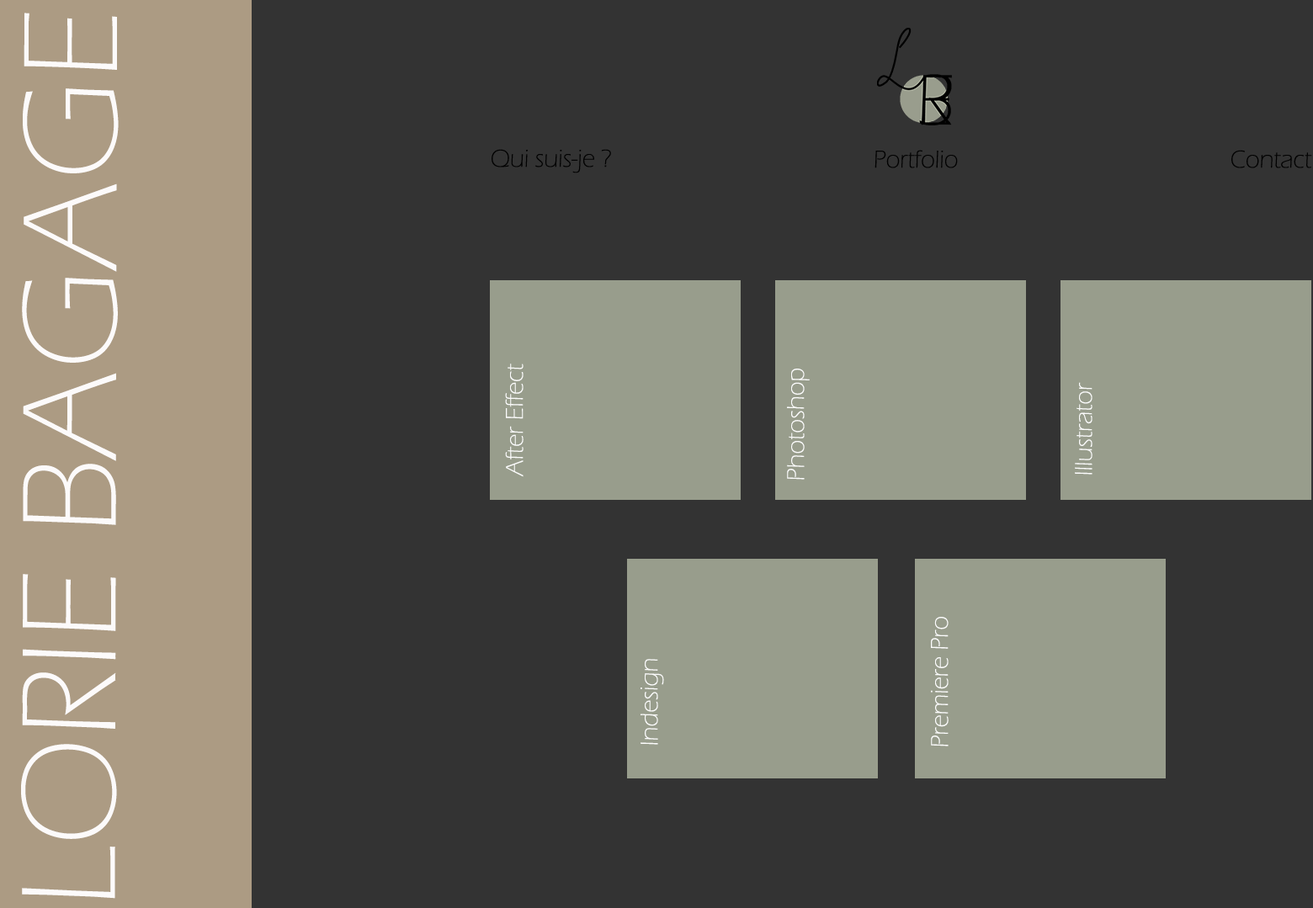
<style>
.page{position:relative;width:1313px;height:908px;background:#333333}
.page>*{position:absolute;margin:0}
.t1{font:138.9px "ErasITC-Light";letter-spacing:-0.005em;color:#fcfafa}
.t2{font:25.3px "ErasITC-Light";letter-spacing:-0.005em;color:#010101}
.t3{font:25.3px "ErasITC-Light";letter-spacing:-0.005em;color:#fcfcfc}
</style>
<div class="page">
<p class="t1" style="left:21px;top:13px;width:98px;height:886px;rotate:-90deg">LORIE BAGAGE</p>
<p class="t2" style="left:492px;top:149px;width:119px;height:24px">Qui suis-je ?</p>
<p class="t2" style="left:874px;top:150px;width:84px;height:18px">Portfolio</p>
<p class="t2" style="left:1231px;top:150px;width:81px;height:18px">Contact</p>
<p class="t3" style="left:505px;top:364px;width:19px;height:113px;rotate:-90deg">After Effect</p>
<p class="t3" style="left:787px;top:369px;width:23px;height:111px;rotate:-90deg">Photoshop</p>
<p class="t3" style="left:1075px;top:382px;width:17px;height:93px;rotate:-90deg">Illustrator</p>
<p class="t3" style="left:931px;top:617px;width:18px;height:130px;rotate:-90deg">Premiere Pro</p>
<p class="t3" style="left:641px;top:659px;width:23px;height:86px;rotate:-90deg">Indesign</p>
</div>
